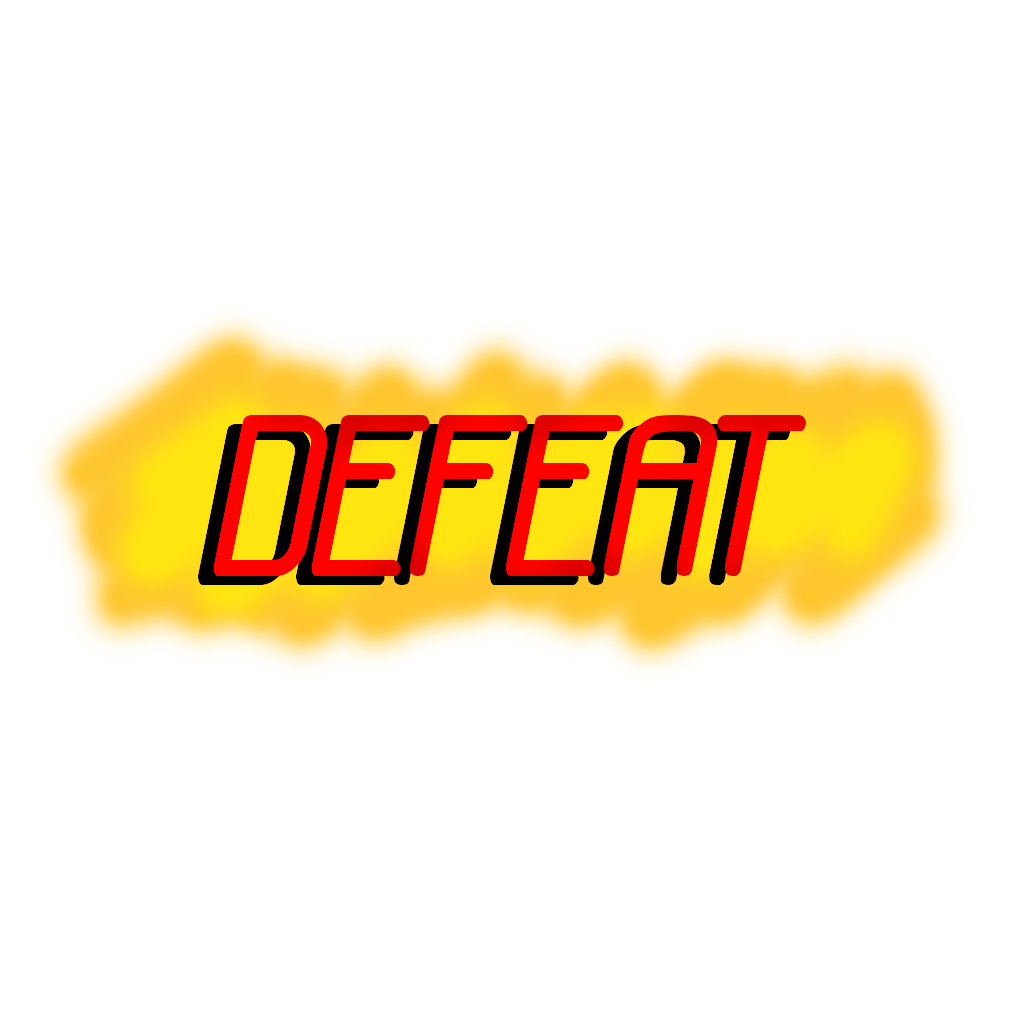
<style>
.page{position:relative;width:1024px;height:1024px;background:#ffffff}
.page>*{position:absolute;margin:0}
.t1{font:233.4px "NeuralBRK";color:#000000}
.t2{font:233.4px "NeuralBRK";color:#fd0200}
</style>
<div class="page">
<p class="t1" style="left:198px;top:424px;width:592px;height:161px">DEFEAT</p>
<p class="t2" style="left:214px;top:415px;width:592px;height:161px">DEFEAT</p>
</div>
